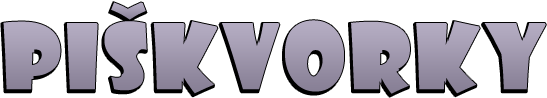
<style>
.page{position:relative;width:547px;height:98px;background:#ffffff}
.page>*{position:absolute;margin:0}
.t1{font:89px "ShowcardGothic-Reg";letter-spacing:0.02em;color:#a49ab5;text-transform:uppercase;font-weight:bold}
</style>
<div class="page">
<p class="t1" style="left:109px;top:2px;width:38px;height:21px">ˇ</p>
<p class="t1" style="left:1px;top:20px;width:545px;height:77px">Piskvorky</p>
</div>
